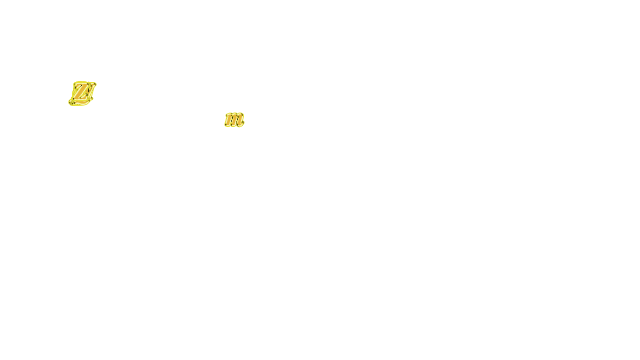
<style>
.page{position:relative;width:640px;height:360px;background:#ffffff}
.page>*{position:absolute;margin:0}
.t1{font:22.6px "Times-BoldItalic";color:#e6b738}
</style>
<div class="page">
<p class="t1" style="left:74px;top:84px;width:14px;height:15px">Z</p>
<p class="t1" style="left:226px;top:114px;width:17px;height:12px">m</p>
</div>
